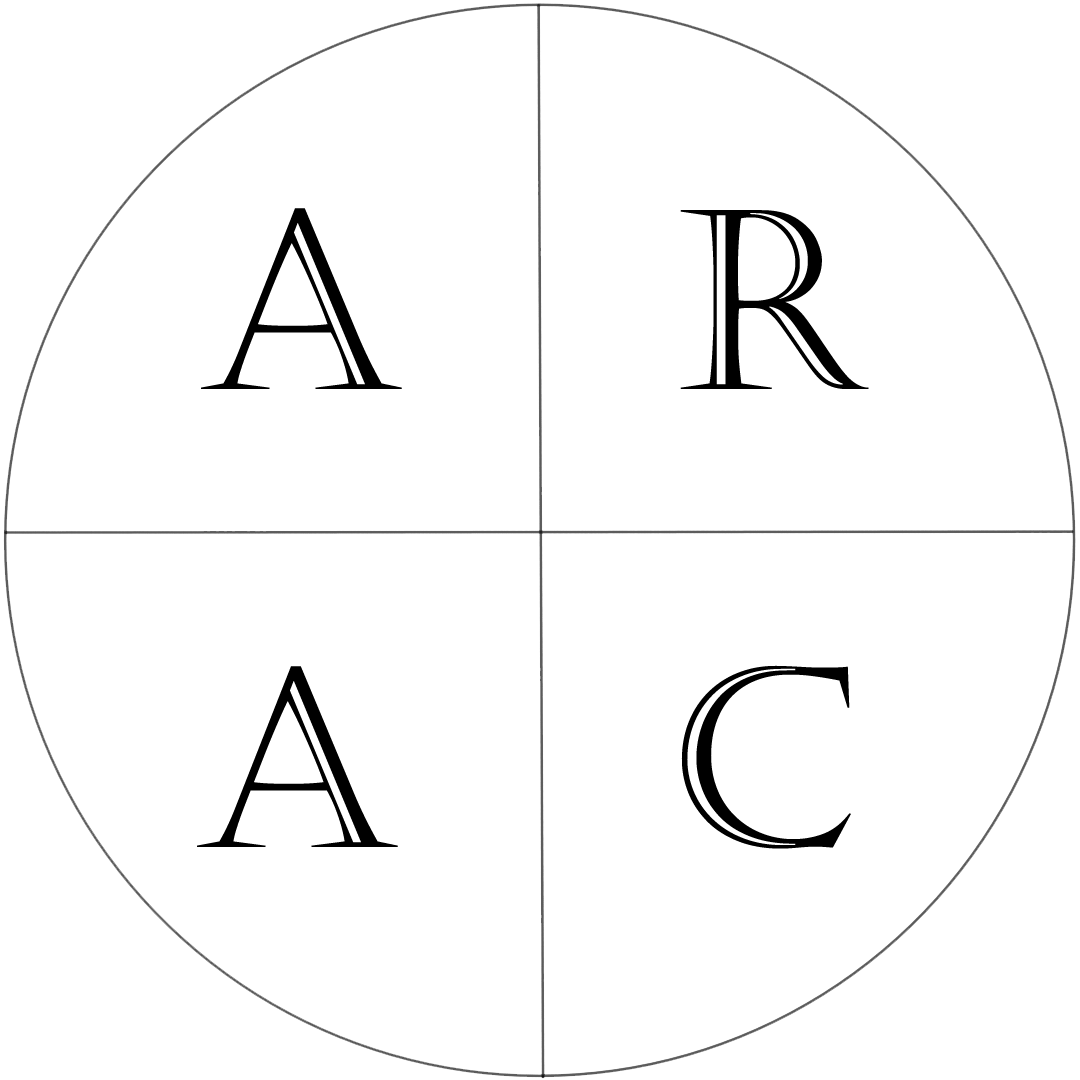
<style>
.page{position:relative;width:1080px;height:1080px;background:#ffffff}
.page>*{position:absolute;margin:0}
.t1{font:250px "Castellar";color:#000000}
</style>
<div class="page">
<p class="t1" style="left:201px;top:208px;width:201px;height:181px">A</p>
<p class="t1" style="left:680px;top:210px;width:189px;height:179px">R</p>
<p class="t1" style="left:681px;top:665px;width:170px;height:184px">C</p>
<p class="t1" style="left:197px;top:666px;width:201px;height:181px">A</p>
</div>
